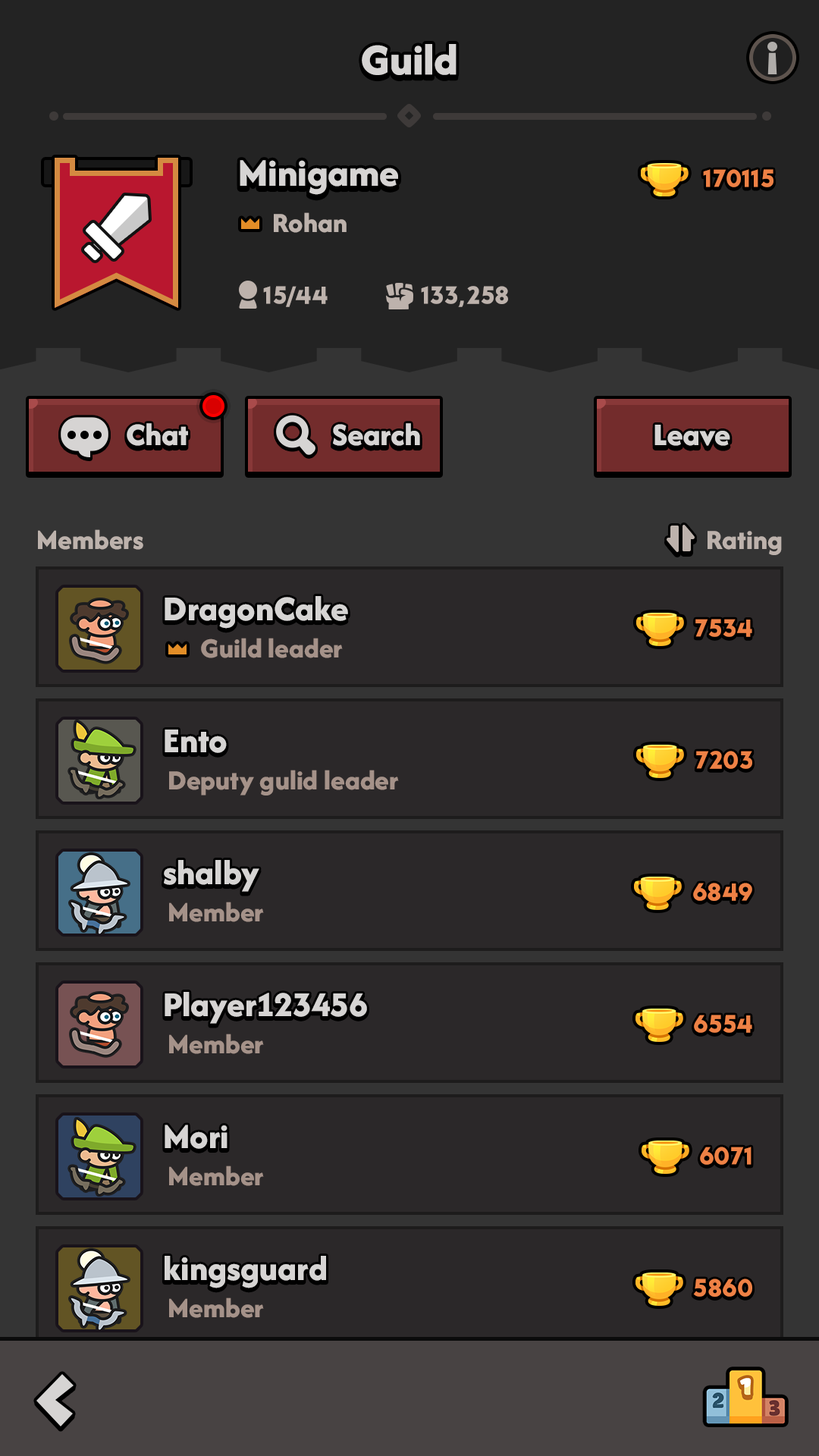
<style>
.page{position:relative;width:819px;height:1456px;background:#2b2829}
.page>*{position:absolute;margin:0}
.t1{font:45.5px "AfacadFlux-ExtraBold";color:#d6d4d3}
.t2{font:40.2px "AfacadFlux-ExtraBold";color:#d6d4d3}
.t3{font:25.8px "LTAvocado-Bold";color:#ee8145}
.t4{font:28.8px "AfacadFlux-ExtraBold";color:#bdb2ac}
.t5{font:25.8px "LTAvocado-Bold";color:#bdb2ac}
.t6{font:32.8px "AfacadFlux-ExtraBold";color:#d6d4d3}
.t7{font:36.4px "AfacadFlux-ExtraBold";color:#d6d4d3}
.t8{font:28.8px "AfacadFlux-ExtraBold";color:#a59289}
</style>
<div class="page">
<p class="t1" style="left:362px;top:44px;width:95px;height:31px">Guild</p>
<p class="t2" style="left:240px;top:160px;width:158px;height:35px">Minigame</p>
<p class="t3" style="left:703px;top:169px;width:70px;height:18px">170115</p>
<p class="t4" style="left:274px;top:212px;width:73px;height:21px">Rohan</p>
<p class="t5" style="left:263px;top:286px;width:65px;height:21px">15/44</p>
<p class="t5" style="left:421px;top:286px;width:87px;height:21px">133,258</p>
<p class="t6" style="left:127px;top:423px;width:61px;height:23px">Chat</p>
<p class="t6" style="left:333px;top:423px;width:87px;height:23px">Search</p>
<p class="t6" style="left:654px;top:425px;width:76px;height:21px">Leave</p>
<p class="t4" style="left:38px;top:529px;width:105px;height:21px">Members</p>
<p class="t4" style="left:708px;top:531px;width:74px;height:24px">Rating</p>
<p class="t7" style="left:165px;top:596px;width:183px;height:33px">DragonCake</p>
<p class="t3" style="left:695px;top:619px;width:57px;height:18px">7534</p>
<p class="t8" style="left:201px;top:638px;width:142px;height:20px">Guild leader</p>
<p class="t7" style="left:165px;top:730px;width:62px;height:23px">Ento</p>
<p class="t3" style="left:696px;top:751px;width:56px;height:18px">7203</p>
<p class="t8" style="left:169px;top:770px;width:230px;height:25px">Deputy gulid leader</p>
<p class="t7" style="left:164px;top:860px;width:95px;height:32px">shalby</p>
<p class="t3" style="left:693px;top:883px;width:59px;height:18px">6849</p>
<p class="t8" style="left:169px;top:902px;width:95px;height:20px">Member</p>
<p class="t7" style="left:165px;top:992px;width:202px;height:32px">Player123456</p>
<p class="t3" style="left:694px;top:1015px;width:58px;height:18px">6554</p>
<p class="t8" style="left:169px;top:1034px;width:95px;height:20px">Member</p>
<p class="t7" style="left:165px;top:1125px;width:62px;height:24px">Mori</p>
<p class="t3" style="left:700px;top:1147px;width:51px;height:18px">6071</p>
<p class="t8" style="left:169px;top:1166px;width:95px;height:20px">Member</p>
<p class="t7" style="left:165px;top:1256px;width:161px;height:32px">kingsguard</p>
<p class="t3" style="left:693px;top:1279px;width:59px;height:18px">5860</p>
<p class="t8" style="left:169px;top:1297px;width:95px;height:21px">Member</p>
</div>
